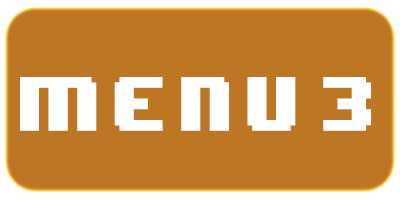
<style>
.page{position:relative;width:400px;height:200px;background:#bc7624}
.page>*{position:absolute;margin:0}
.t1{font:64.3px "8BITWONDERNominal";letter-spacing:0.16em;color:#ffffff;scale:0.89 1}
</style>
<div class="page">
<p class="t1" style="left:20px;top:77px;width:351px;height:54px">Menu 3</p>
</div>
